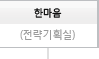
<style>
.page{position:relative;width:99px;height:59px;background:#ffffff}
.page>*{position:absolute;margin:0}
.t1{font:10px "MalgunGothicRegular";letter-spacing:-0.05em;color:#000000;scale:0.95 1}
.t2{font:11px "MalgunGothicRegular";letter-spacing:-0.05em;color:#9b9b9b;scale:0.95 1}
</style>
<div class="page">
<p class="t1" style="left:34px;top:8px;width:28px;height:10px">한마음</p>
<p class="t2" style="left:20px;top:29px;width:55px;height:12px">(전략기획실)</p>
</div>
